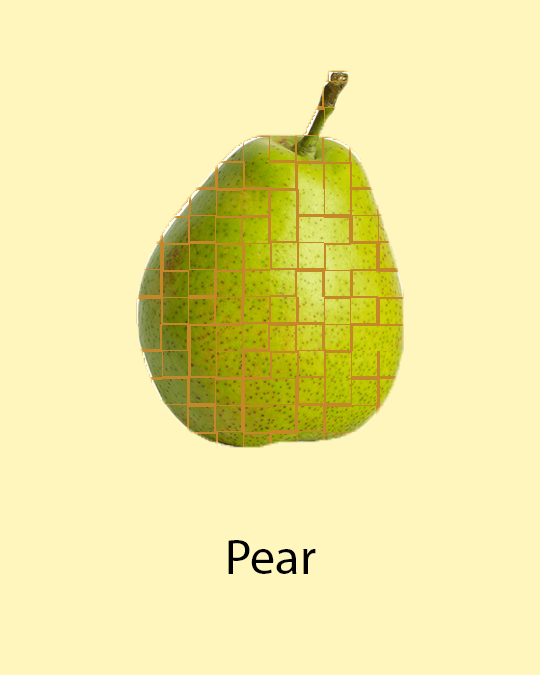
<style>
.page{position:relative;width:540px;height:675px;background:#fff6bd}
.page>*{position:absolute;margin:0}
.t1{font:50px "MyriadPro-Regular";color:#000000}
</style>
<div class="page">
<p class="t1" style="left:228px;top:540px;width:88px;height:34px">Pear</p>
</div>
